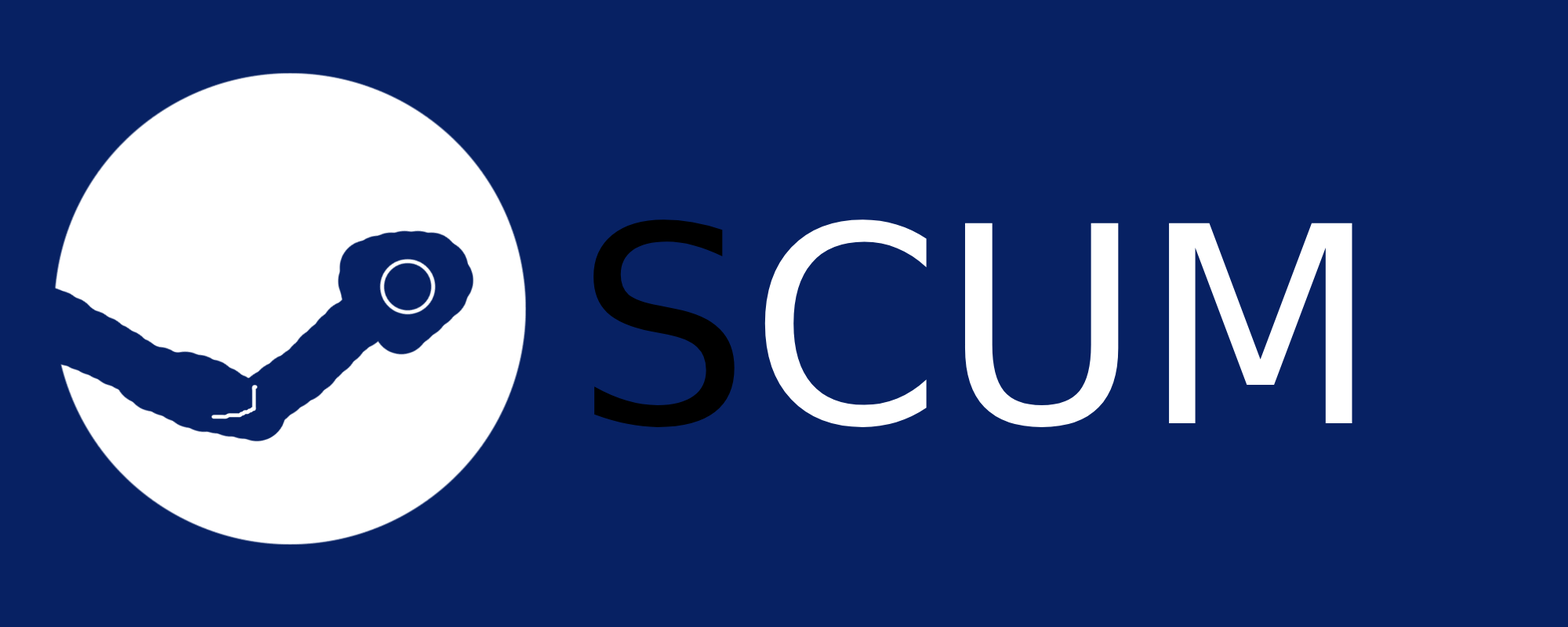
<style>
.page{position:relative;width:1568px;height:627px;background:#072163}
.page>*{position:absolute;margin:0}
.t1{font:274.4px "DejaVuSans";color:#ffffff}
.t2{font:274.4px "DejaVuSans";color:#000000}
</style>
<div class="page">
<p class="t1" style="left:593px;top:220px;width:759px;height:207px"><span class="t2">S</span>CUM</p>
</div>
